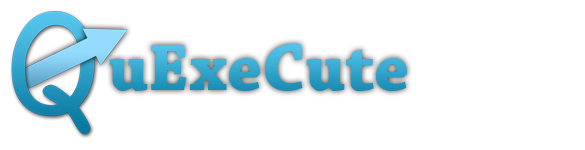
<style>
.page{position:relative;width:585px;height:150px;background:#ffffff}
.page>*{position:absolute;margin:0}
.t1{font:70px "ChaparralPro-Bold";color:#2192ba}
</style>
<div class="page">
<p class="t1" style="left:109px;top:44px;width:298px;height:47px">uExeCute</p>
</div>
